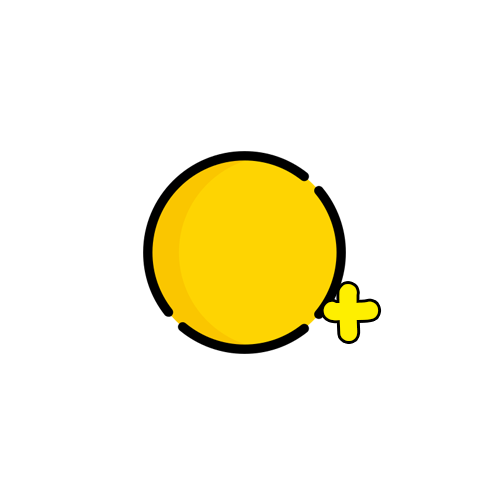
<style>
.page{position:relative;width:500px;height:500px;background:#ffffff}
.page>*{position:absolute;margin:0}
.t1{font:140px "AutumBright";color:#feef00}
</style>
<div class="page">
<p class="t1" style="left:323px;top:284px;width:56px;height:57px">+</p>
</div>
